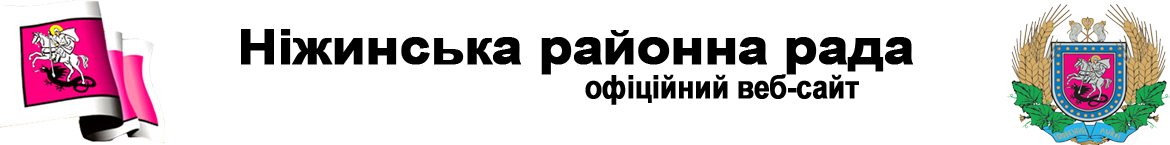
<style>
.page{position:relative;width:1170px;height:145px;background:#ffffff}
.page>*{position:absolute;margin:0}
.t1{font:48px "Arial-BoldMT";letter-spacing:-0.025em;color:#000000;font-weight:bold;scale:1.15 1}
.t2{font:32px "Arial-BoldMT";letter-spacing:-0.025em;color:#000000;font-weight:bold;scale:0.88 1}
</style>
<div class="page">
<p class="t1" style="left:241px;top:29px;width:672px;height:46px">Ніжинська районна рада</p>
<p class="t2" style="left:585px;top:74px;width:274px;height:31px">офіційний веб-сайт</p>
</div>
